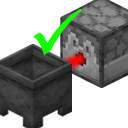
<style>
.page{position:relative;width:128px;height:128px;background:#ffffff}
.page>*{position:absolute;margin:0}
.t1{font:72px "OpenSymbol";color:#12ff00}
</style>
<div class="page">
<p class="t1" style="left:33px;top:9px;width:49px;height:46px">✓</p>
</div>
